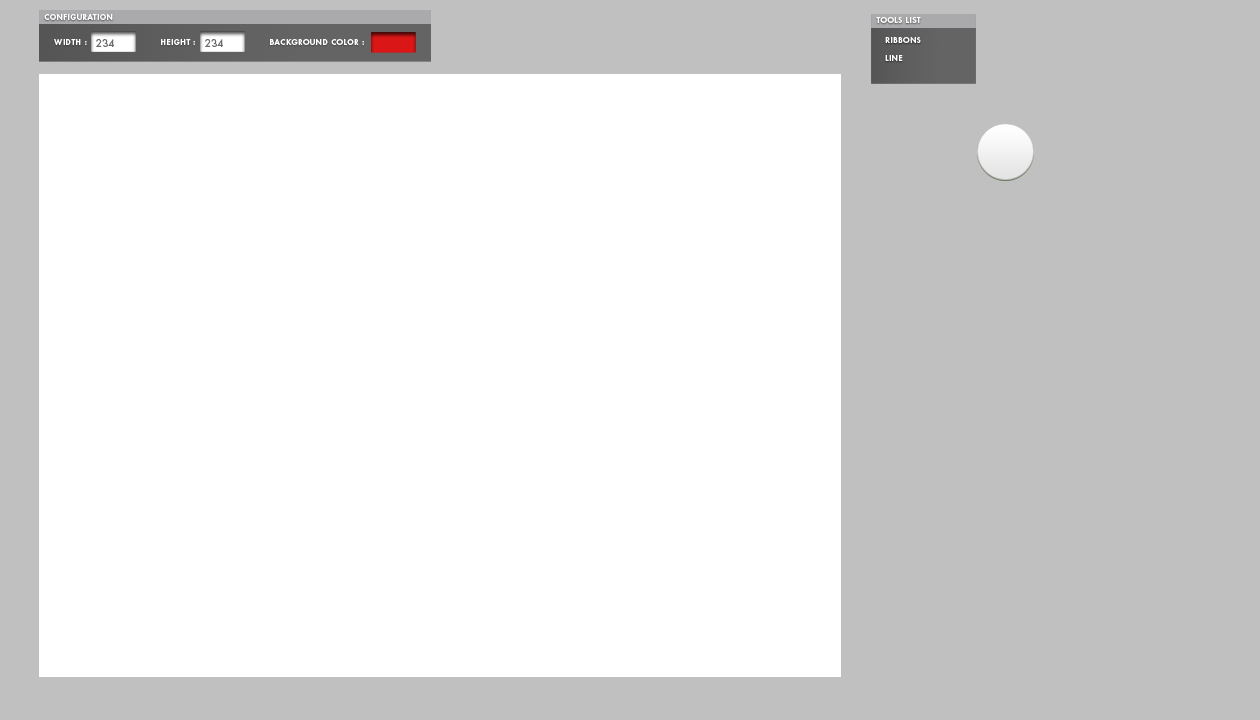
<style>
.page{position:relative;width:1260px;height:720px;background:#ffffff}
.page>*{position:absolute;margin:0}
.t1{font:8px "FuturaStd-Heavy";letter-spacing:0.075em;color:#ffffff}
.t2{font:10px "FuturaStd-Medium";letter-spacing:0.075em;color:#6d6d6d}
</style>
<div class="page">
<p class="t1" style="left:44px;top:14px;width:69px;height:6px">CONFIGURATION</p>
<p class="t1" style="left:876px;top:17px;width:45px;height:6px">TOOLS LIST</p>
<p class="t1" style="left:54px;top:39px;width:33px;height:6px">WIDTH :</p>
<p class="t2" style="left:96px;top:39px;width:18px;height:8px">234</p>
<p class="t1" style="left:161px;top:39px;width:34px;height:6px">HEIGHT :</p>
<p class="t2" style="left:205px;top:39px;width:18px;height:8px">234</p>
<p class="t1" style="left:270px;top:39px;width:94px;height:6px">BACKGROUND COLOR :</p>
<p class="t1" style="left:885px;top:37px;width:36px;height:6px">RIBBONS</p>
<p class="t1" style="left:885px;top:55px;width:18px;height:6px">LINE</p>
</div>
